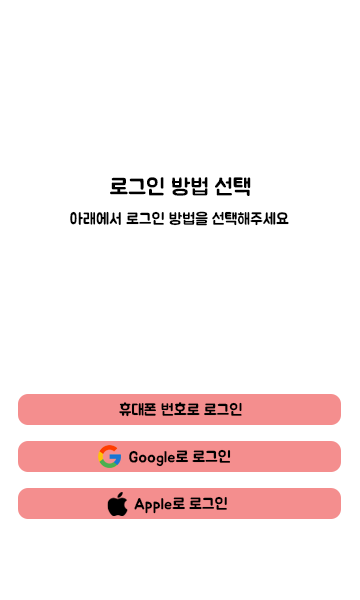
<style>
.page{position:relative;width:360px;height:600px;background:#ffffff}
.page>*{position:absolute;margin:0}
.t1{font:23px "BMJUA";color:#000000}
.t2{font:16px "BMJUA";color:#000000}
</style>
<div class="page">
<p class="t1" style="left:110px;top:177px;width:141px;height:19px">로그인 방법 선택</p>
<p class="t2" style="left:70px;top:211px;width:219px;height:15px">아래에서 로그인 방법을 선택해주세요</p>
<p class="t2" style="left:119px;top:402px;width:123px;height:15px">휴대폰 번호로 로그인</p>
<p class="t2" style="left:129px;top:449px;width:102px;height:18px">Google로 로그인</p>
<p class="t2" style="left:134px;top:496px;width:93px;height:18px">Apple로 로그인</p>
</div>
